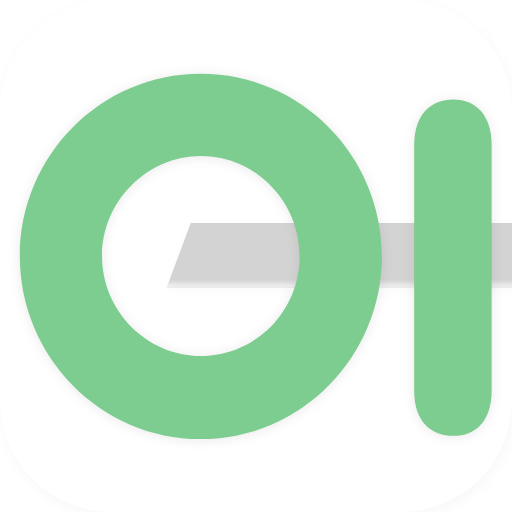
<style>
.page{position:relative;width:512px;height:512px;background:#ffffff}
.page>*{position:absolute;margin:0}
.t1{font:475.1px "HirukoPro-Black";color:#7ccd8f}
</style>
<div class="page">
<p class="t1" style="left:19px;top:73px;width:473px;height:366px">Ol</p>
</div>
